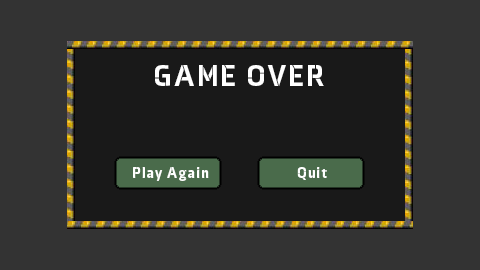
<style>
.page{position:relative;width:480px;height:270px;background:#333333}
.page>*{position:absolute;margin:0}
.t1{font:30px "AxiaStencilBlack-Regular";letter-spacing:0.075em;color:#ffffff}
.t2{font:15px "AxiaStencilBlack-Regular";letter-spacing:0.075em;color:#ffffff}
</style>
<div class="page">
<p class="t1" style="left:155px;top:65px;width:169px;height:21px">GAME OVER</p>
<p class="t2" style="left:133px;top:167px;width:76px;height:14px">Play Again</p>
<p class="t2" style="left:297px;top:167px;width:30px;height:13px">Quit</p>
</div>
